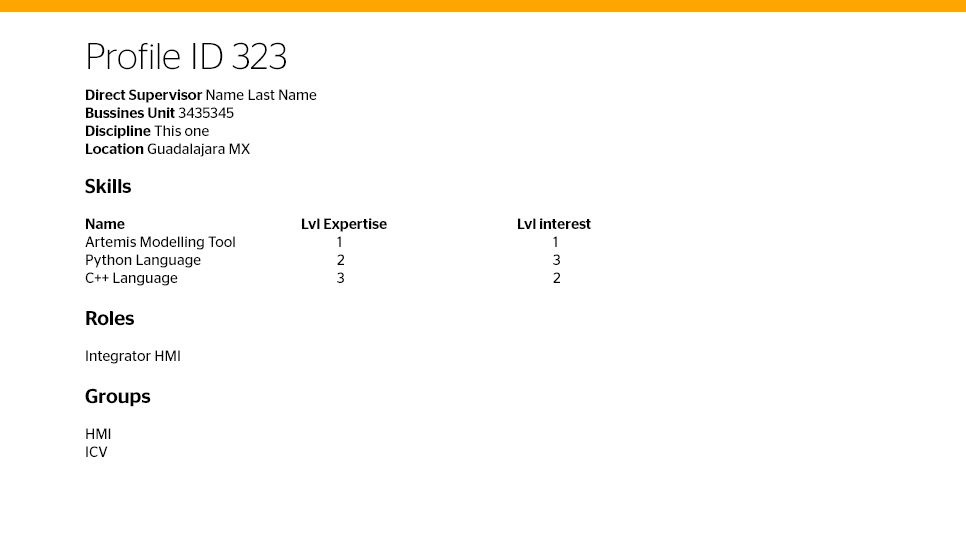
<style>
.page{position:relative;width:966px;height:551px;background:#ffffff}
.page>*{position:absolute;margin:0}
.t1{font:37.1px "ContinentalStagSans-Light";color:#000000}
.t2{font:15px "ContinentalStagSans-Medium";color:#000000}
.t3{font:15px "ContinentalStagSans-Book";color:#000000}
.t4{font:20px "ContinentalStagSans-Medium";color:#000000}
</style>
<div class="page">
<p class="t1" style="left:88px;top:42px;width:198px;height:28px">Profile ID 323</p>
<p class="t2" style="left:86px;top:89px;width:231px;height:68px">Direct Supervisor <span class="t3">Name Last Name<br></span>Bussines Unit<span class="t3"> 3435345<br></span>Discipline<span class="t3"> This one<br></span>Location<span class="t3"> Guadalajara MX</span></p>
<p class="t3" style="left:85px;top:178px;width:506px;height:279px"><span class="t4">Skills<br><br></span><span class="t2">Name     Lvl Expertise     Lvl interest<br></span>Artemis Modelling Tool   1      1<br>Python Language    2      3<br>C++ Language     3      2<br><br><span class="t4">Roles<br><br></span>Integrator HMI<br> <br><span class="t4">Groups<br><br></span>HMI<br>ICV</p>
</div>
